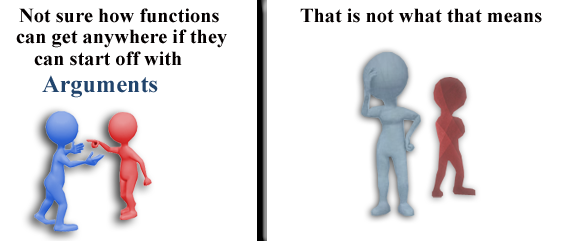
<style>
.page{position:relative;width:570px;height:241px;background:#ffffff}
.page>*{position:absolute;margin:0}
.t1{font:20.3px "TimesNewRomanPS-BoldMT";color:#040000}
.t2{font:24.3px "TimesNewRomanPS-BoldMT";color:#21446c}
</style>
<div class="page">
<p class="t1" style="left:19px;top:8px;width:200px;height:15px">Not sure how functions</p>
<p class="t1" style="left:300px;top:8px;width:242px;height:15px">That is not what that means</p>
<p class="t1" style="left:16px;top:29px;width:211px;height:19px">can get anywhere if they</p>
<p class="t1" style="left:34px;top:51px;width:148px;height:15px">can start off with</p>
<p class="t2" style="left:42px;top:75px;width:116px;height:23px">Arguments</p>
</div>
